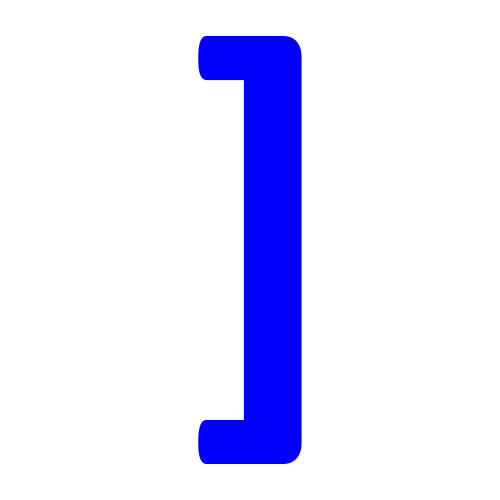
<style>
.page{position:relative;width:500px;height:500px;background:#ffffff}
.page>*{position:absolute;margin:0}
.t1{font:500px "Calibri-Bold";color:#0000ff}
</style>
<div class="page">
<p class="t1" style="left:198px;top:36px;width:104px;height:428px">]</p>
</div>
